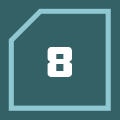
<style>
.page{position:relative;width:120px;height:120px;background:#336166}
.page>*{position:absolute;margin:0}
.t1{font:48px "TransformersMovie";color:#ffffff}
</style>
<div class="page">
<p class="t1" style="left:47px;top:47px;width:25px;height:30px">8</p>
</div>
